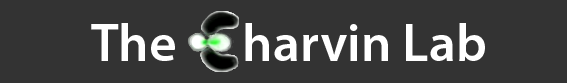
<style>
.page{position:relative;width:567px;height:83px;background:#333333}
.page>*{position:absolute;margin:0}
.t1{font:53.3px "MyriadPro-Semibold";color:#ffffff}
</style>
<div class="page">
<p class="t1" style="left:91px;top:23px;width:394px;height:38px">The      harvin Lab</p>
</div>
